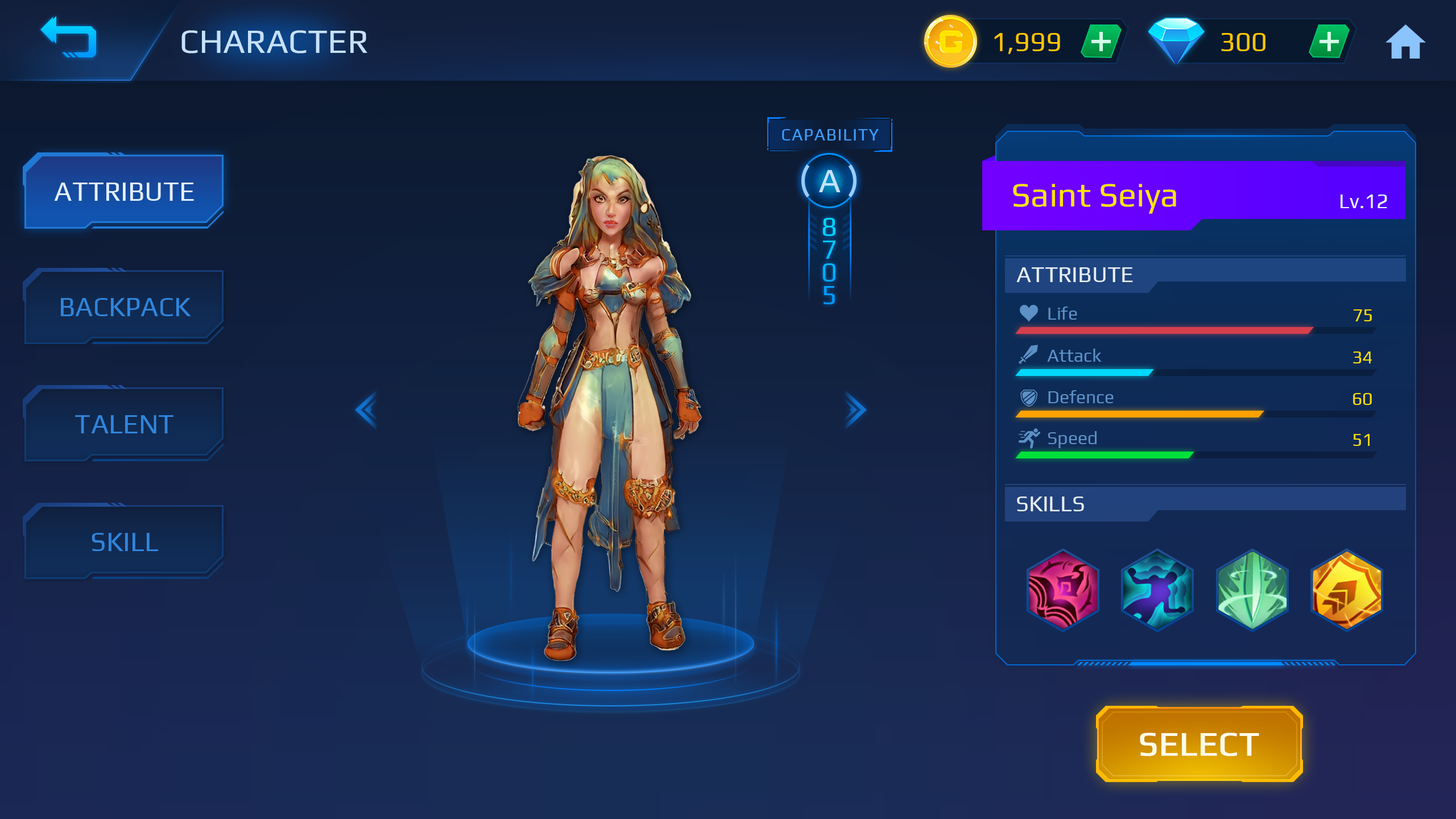
<style>
.page{position:relative;width:1456px;height:819px}
.page>*{position:absolute;margin:0}
.t1{font:34.1px "Play-Regular";color:#c6e1fc}
.t2{font:27.3px "Play-Regular";color:#ffc600}
.t3{font:17.1px "Play-Regular";letter-spacing:0.05em;color:#3e9dff;text-transform:uppercase}
.t4{font:34.2px "Play-Regular";color:#c5e2ff}
.t5{font:27.3px "Play-Regular";color:#e3f1ff}
.t6{font:34.1px "Play-Regular";color:#ffe400}
.t7{font:20.5px "Play-Regular";color:#eaf5ff}
.t8{font:27.3px/22.7px "Play-Regular"}
.t9{font:22.7px "Play-Regular";color:#e6eff8}
.t10{font:27.3px "Play-Regular";color:#3085dc}
.t11{font:18.2px "Play-Regular";color:#5c90c6}
.t12{font:18.2px "Play-Regular";color:#f8de05}
.t13{font:34.1px "Play-Regular";color:#fffbe7;text-transform:uppercase;font-weight:bold}
</style>
<div class="page">
<p class="t1" style="left:181px;top:30px;width:186px;height:23px">CHARACTER</p>
<p class="t2" style="left:994px;top:33px;width:66px;height:21px">1,999</p>
<p class="t2" style="left:1221px;top:33px;width:44px;height:18px">300</p>
<p class="t3" style="left:782px;top:129px;width:97px;height:11px">Capability</p>
<p class="t4" style="left:819px;top:170px;width:22px;height:22px">A</p>
<p class="t5" style="left:54px;top:183px;width:140px;height:18px">ATTRIBUTE</p>
<p class="t6" style="left:1013px;top:184px;width:163px;height:30px">Saint Seiya</p>
<p class="t7" style="left:1341px;top:195px;width:46px;height:13px">Lv.12</p>
<p class="t8" style="left:822px;top:218px;width:13px;height:86px;text-align:center">8<br>7<br>0<br>5</p>
<p class="t9" style="left:1016px;top:267px;width:117px;height:15px">ATTRIBUTE</p>
<p class="t10" style="left:61px;top:298px;width:130px;height:18px">BACKPACK</p>
<p class="t11" style="left:1048px;top:307px;width:29px;height:13px">Life</p>
<p class="t12" style="left:1354px;top:309px;width:18px;height:12px">75</p>
<p class="t11" style="left:1047px;top:349px;width:55px;height:13px">Attack</p>
<p class="t12" style="left:1353px;top:351px;width:19px;height:12px">34</p>
<p class="t11" style="left:1048px;top:390px;width:66px;height:13px">Defence</p>
<p class="t12" style="left:1353px;top:393px;width:19px;height:12px">60</p>
<p class="t10" style="left:75px;top:415px;width:98px;height:18px">TALENT</p>
<p class="t11" style="left:1048px;top:431px;width:49px;height:17px">Speed</p>
<p class="t12" style="left:1353px;top:434px;width:17px;height:12px">51</p>
<p class="t9" style="left:1017px;top:497px;width:67px;height:14px">SKILLS</p>
<p class="t10" style="left:92px;top:533px;width:66px;height:18px">SKILL</p>
<p class="t13" style="left:1140px;top:733px;width:119px;height:23px">SELECT</p>
</div>
